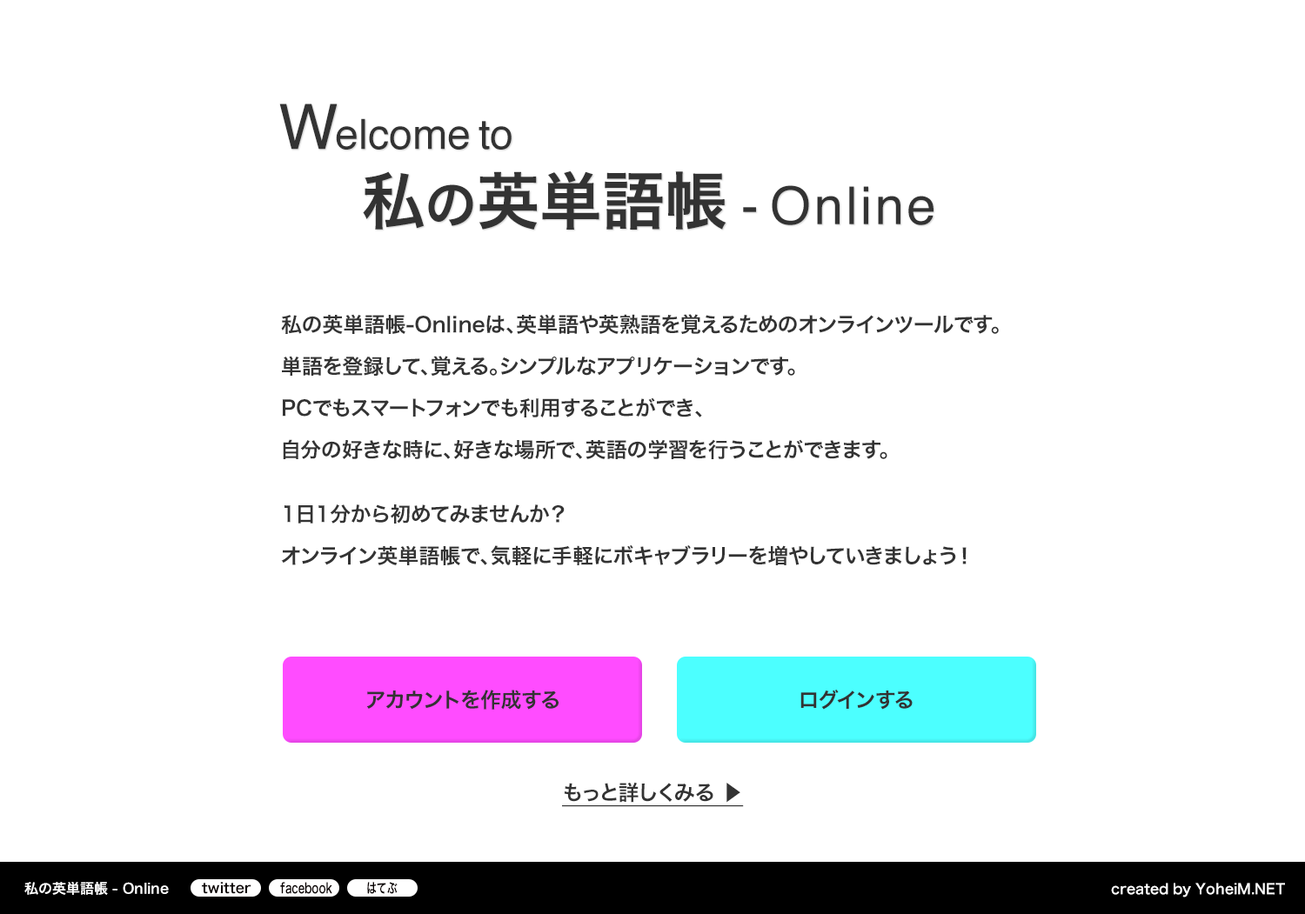
<style>
.page{position:relative;width:1305px;height:914px;background:#ffffff}
.page>*{position:absolute;margin:0}
.t1{font:41.7px "Helvetica";color:#333333}
.t2{font:62.6px "Helvetica";color:#333333}
.t3{font:62.6px "HiraKakuPro-W6";color:#333333}
.t4{font:52.2px "HiraKakuPro-W6";color:#333333}
.t5{font:52.2px "Helvetica";color:#333333}
.t6{font:52.2px "Helvetica";letter-spacing:0.06em;color:#333333}
.t7{font:20.9px/41.7px "HiraKakuPro-W6";color:#333333}
.t8{font:20.9px "HiraKakuPro-W6";color:#333333}
.t9{font:20.9px "HiraKakuPro-W6";color:#333333;text-decoration:underline}
.t10{font:13.9px "HiraKakuPro-W6";color:#ffffff}
.t11{font:13.9px "HiraKakuPro-W6";color:#070000}
.t12{font:13.8px "HiraKakuPro-W6";color:#070000;scale:0.75 1}
</style>
<div class="page">
<p class="t1" style="left:279px;top:103px;width:654px;height:127px"><span class="t2">W</span>elcome to <br><span class="t3">    私</span><span class="t4">の</span><span class="t3">英単語帳 </span><span class="t5">- </span><span class="t6">Online</span></p>
<p class="t7" style="left:281px;top:314px;width:717px;height:145px">私の英単語帳-Onlineは、英単語や英熟語を覚えるためのオンラインツールです。<br>単語を登録して、覚える。シンプルなアプリケーションです。<br>PCでもスマートフォンでも利用することができ、<br>自分の好きな時に、好きな場所で、英語の学習を行うことができます。</p>
<p class="t7" style="left:281px;top:504px;width:685px;height:62px">1日1分から初めてみませんか？<br>オンライン英単語帳で、気軽に手軽にボキャブラリーを増やしていきましょう！</p>
<p class="t8" style="left:366px;top:690px;width:192px;height:20px">アカウントを作成する</p>
<p class="t8" style="left:800px;top:690px;width:112px;height:20px">ログインする</p>
<p class="t9" style="left:562px;top:782px;width:182px;height:25px">もっと詳しくみる ▶</p>
<p class="t10" style="left:24px;top:882px;width:145px;height:13px">私の英単語帳 - Online</p>
<p class="t11" style="left:202px;top:882px;width:49px;height:12px">twitter</p>
<p class="t12" style="left:280px;top:882px;width:52px;height:12px">facebook</p>
<p class="t12" style="left:367px;top:882px;width:30px;height:12px">はてぶ</p>
<p class="t10" style="left:1111px;top:883px;width:174px;height:15px">created by YoheiM.NET</p>
</div>
